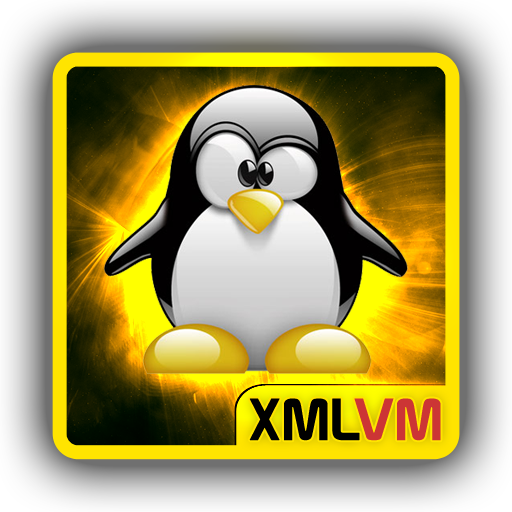
<style>
.page{position:relative;width:512px;height:512px}
.page>*{position:absolute;margin:0}
.t1{font:58.2px "Prototype";color:#000000}
.t2{font:58.2px "Prototype";color:#cc3535}
</style>
<div class="page">
<p class="t1" style="left:249px;top:398px;width:192px;height:43px">XML<span class="t2">VM</span></p>
</div>
